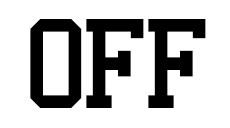
<style>
.page{position:relative;width:230px;height:128px;background:#ffffff}
.page>*{position:absolute;margin:0}
.t1{font:130.1px "College";letter-spacing:-0.06em;color:#000000}
</style>
<div class="page">
<p class="t1" style="left:30px;top:19px;width:176px;height:89px">OFF</p>
</div>
